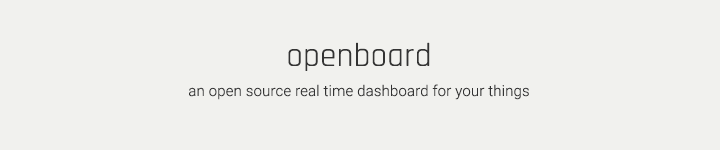
<style>
.page{position:relative;width:720px;height:150px;background:#f1f1ee}
.page>*{position:absolute;margin:0}
.t1{font:33px "Rajdhani-Regular";letter-spacing:0.01em;color:#333333}
.t2{font:15px "Roboto-Light";letter-spacing:0.01em;color:#333333}
</style>
<div class="page">
<p class="t1" style="left:288px;top:42px;width:142px;height:29px">openboard</p>
<p class="t2" style="left:189px;top:84px;width:340px;height:16px">an open source real time dashboard for your things</p>
</div>
